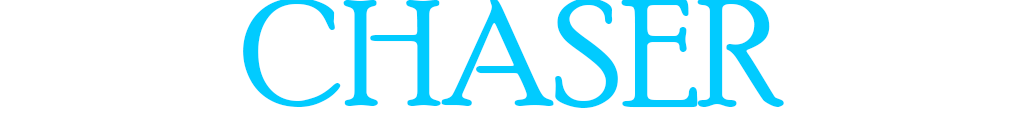
<style>
.page{position:relative;width:1024px;height:128px;background:#ffffff}
.page>*{position:absolute;margin:0}
.t1{font:150px "PoorRichard-Regular";color:#01cbff}
</style>
<div class="page">
<p class="t1" style="left:243px;top:0px;width:541px;height:108px">CHASER</p>
</div>
